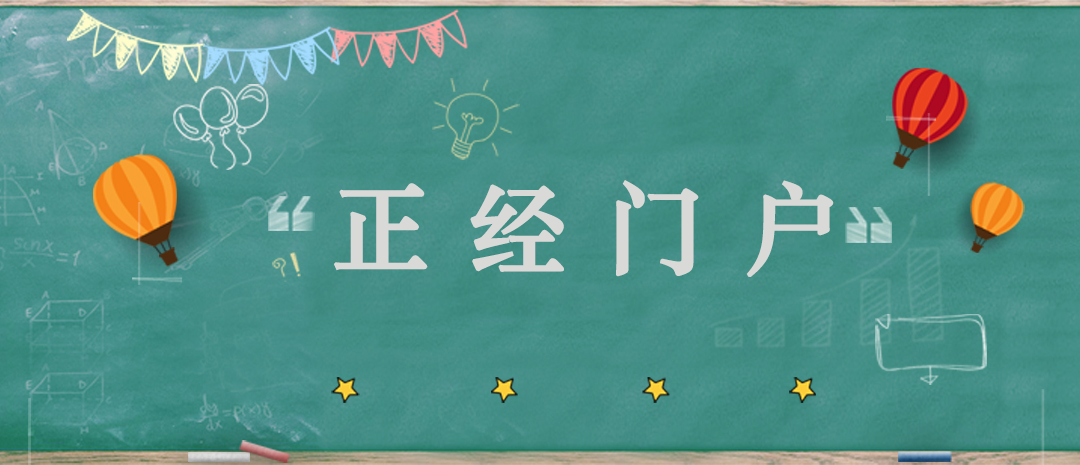
<style>
.page{position:relative;width:1080px;height:465px}
.page>*{position:absolute;margin:0}
.t1{font:100px "STZhongsong";color:#d9d9d8;font-weight:bold}
</style>
<div class="page">
<p class="t1" style="left:334px;top:180px;width:500px;height:97px">正 经 门 户</p>
</div>
